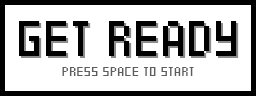
<style>
.page{position:relative;width:256px;height:96px;background:#ffffff}
.page>*{position:absolute;margin:0}
.t1{font:66.7px "CyrBit";color:#000000}
.t2{font:18.3px "CyrBit";color:#5d5d5d}
</style>
<div class="page">
<p class="t1" style="left:19px;top:21px;width:218px;height:35px">GET READY</p>
<p class="t2" style="left:62px;top:67px;width:132px;height:9px">PRESS SPACE TO START</p>
</div>
